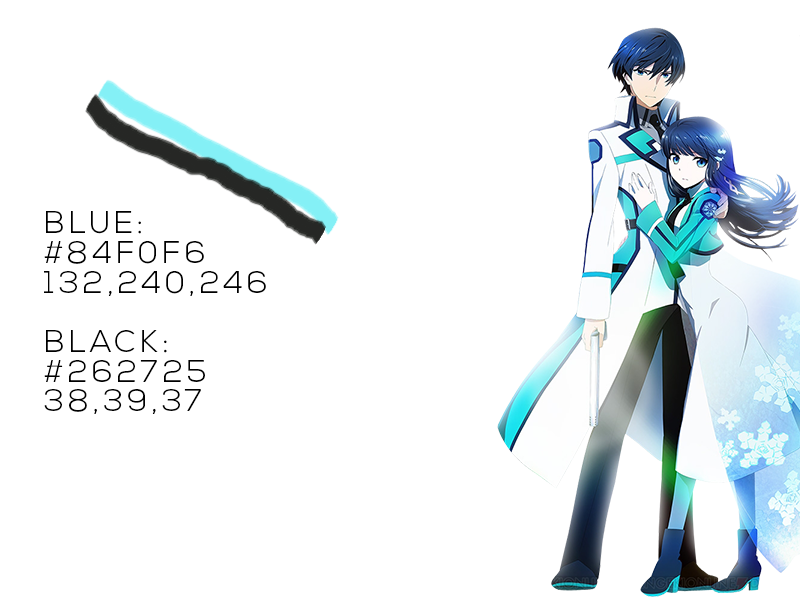
<style>
.page{position:relative;width:800px;height:600px;background:#ffffff}
.page>*{position:absolute;margin:0}
.t1{font:30.9px/29.7px "NexaLight";letter-spacing:0.138em;color:#000000;text-transform:uppercase}
</style>
<div class="page">
<p class="t1" style="left:44px;top:211px;width:222px;height:203px">blue:<br>#84f0f6<br>132,240,246<br><br>black:<br>#262725<br>38,39,37</p>
</div>
